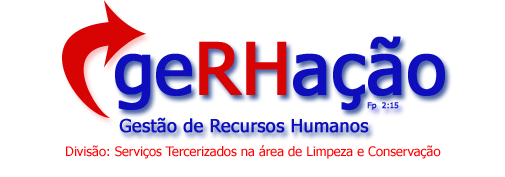
<style>
.page{position:relative;width:505px;height:177px;background:#ffffff}
.page>*{position:absolute;margin:0}
.t1{font:72px "Tahoma";color:#0e0ebc;font-weight:bold}
.t2{font:72px "Tahoma";color:#d80303;font-weight:bold}
.t3{font:8px "Tahoma";color:#0e0ebc;font-weight:bold}
.t4{font:18px "Tahoma";color:#0e0ebc;font-weight:bold}
.t5{font:13px "Tahoma";color:#ff0000}
</style>
<div class="page">
<p class="t1" style="left:115px;top:36px;width:330px;height:74px">ge<span class="t2">RH</span>ação</p>
<p class="t3" style="left:367px;top:102px;width:32px;height:8px">Fp  2:15</p>
<p class="t4" style="left:119px;top:117px;width:250px;height:16px">Gestão de Recursos Humanos</p>
<p class="t5" style="left:66px;top:145px;width:375px;height:14px">Divisão: Serviços Tercerizados na área de Limpeza e Conservação</p>
</div>
